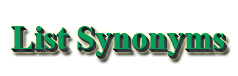
<style>
.page{position:relative;width:238px;height:76px;background:#ffffff}
.page>*{position:absolute;margin:0}
.t1{font:34px "TimesNewRomanPS-BoldMT";color:#089f5c}
</style>
<div class="page">
<p class="t1" style="left:11px;top:26px;width:213px;height:30px">List Synonyms</p>
</div>
